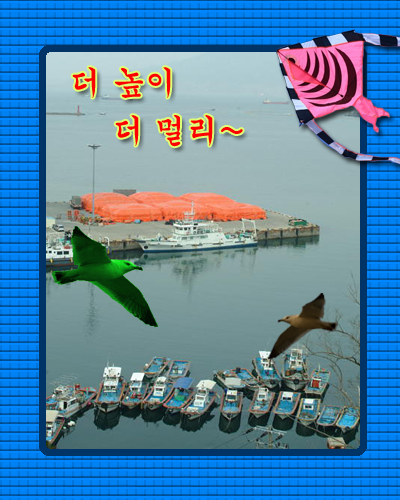
<style>
.page{position:relative;width:400px;height:500px}
.page>*{position:absolute;margin:0}
.t1{font:32px/48px "Gungsuh";color:#ff0000}
</style>
<div class="page">
<p class="t1" style="left:72px;top:67px;width:171px;height:80px">더 높이<br>    더 멀리~</p>
</div>
